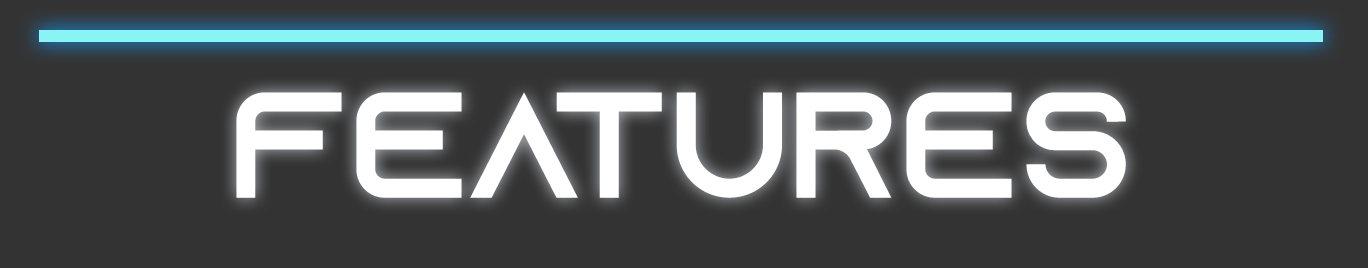
<style>
.page{position:relative;width:1368px;height:268px;background:#333333}
.page>*{position:absolute;margin:0}
.t1{font:150px "AzonixRegular";color:#ffffff}
</style>
<div class="page">
<p class="t1" style="left:236px;top:92px;width:890px;height:106px">FEATURES</p>
</div>
